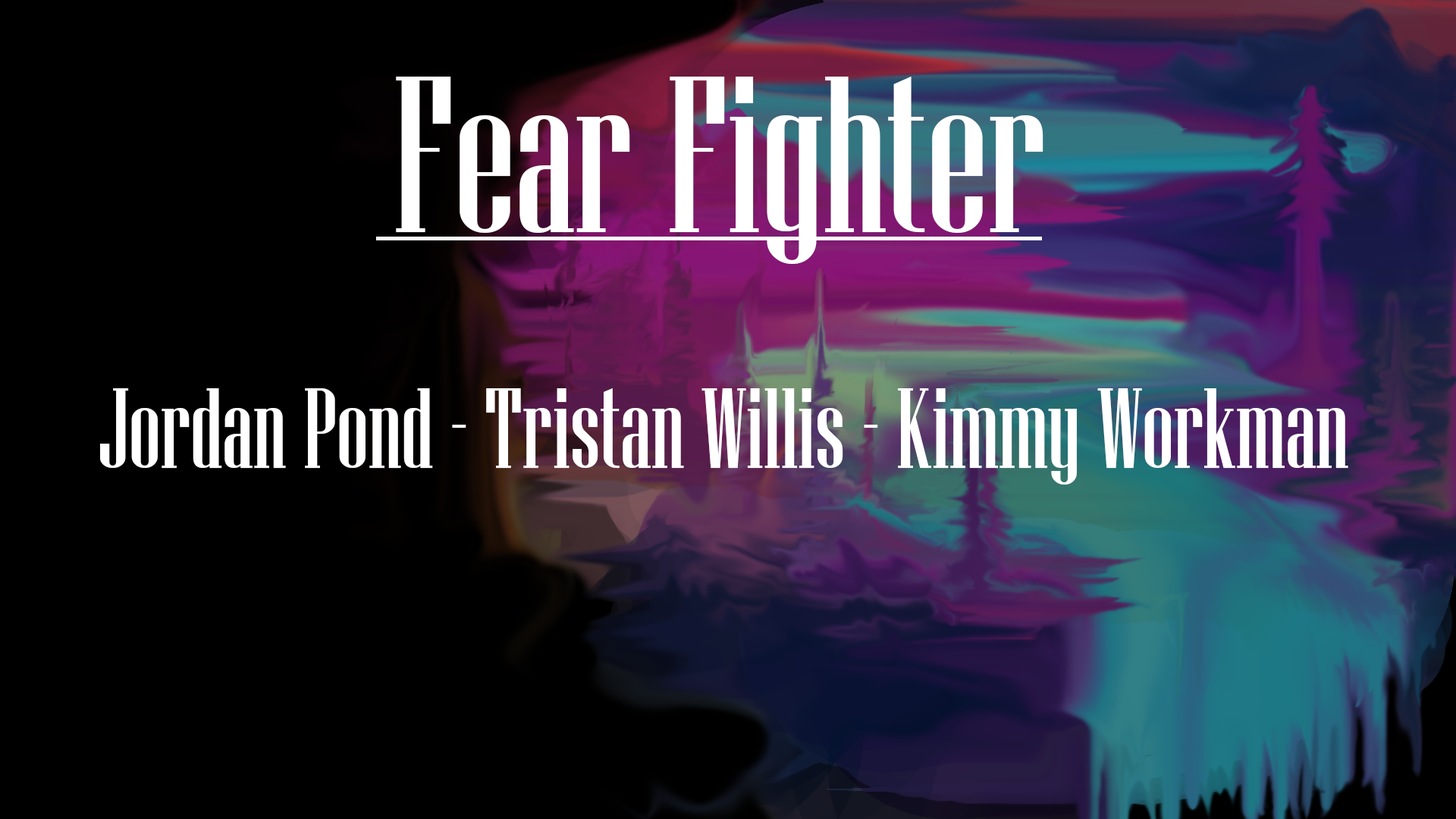
<style>
.page{position:relative;width:1456px;height:819px;background:#000000}
.page>*{position:absolute;margin:0}
.t1{font:222.2px "NiagaraSolid-Reg";color:#ffffff}
.t2{font:114.5px "NiagaraSolid-Reg";color:#ffffff}
</style>
<div class="page">
<p class="t1" style="left:396px;top:77px;width:647px;height:187px">Fear Fighter</p>
<p class="t2" style="left:100px;top:388px;width:1248px;height:97px">Jordan Pond - Tristan Willis - Kimmy Workman</p>
</div>
